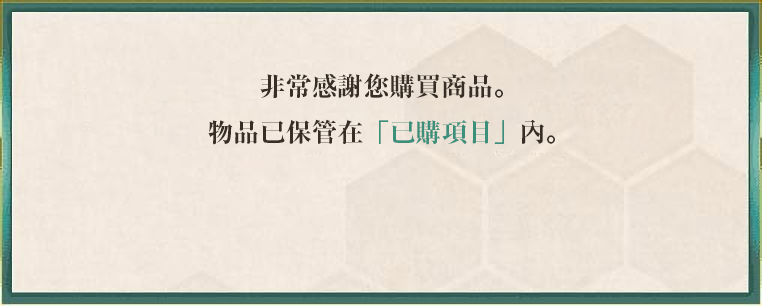
<style>
.page{position:relative;width:762px;height:306px}
.page>*{position:absolute;margin:0}
.t1{font:26px "RyuminPr6N-ExBold";color:#382e25}
.t2{font:26px "RyuminPr6N-ExBold";color:#3c8f7a}
</style>
<div class="page">
<p class="t1" style="left:208px;top:73px;width:347px;height:72px;text-align:center">非常感謝您購買商品。<br>物品已保管在<span class="t2">「已購項目」</span>內。</p>
</div>
